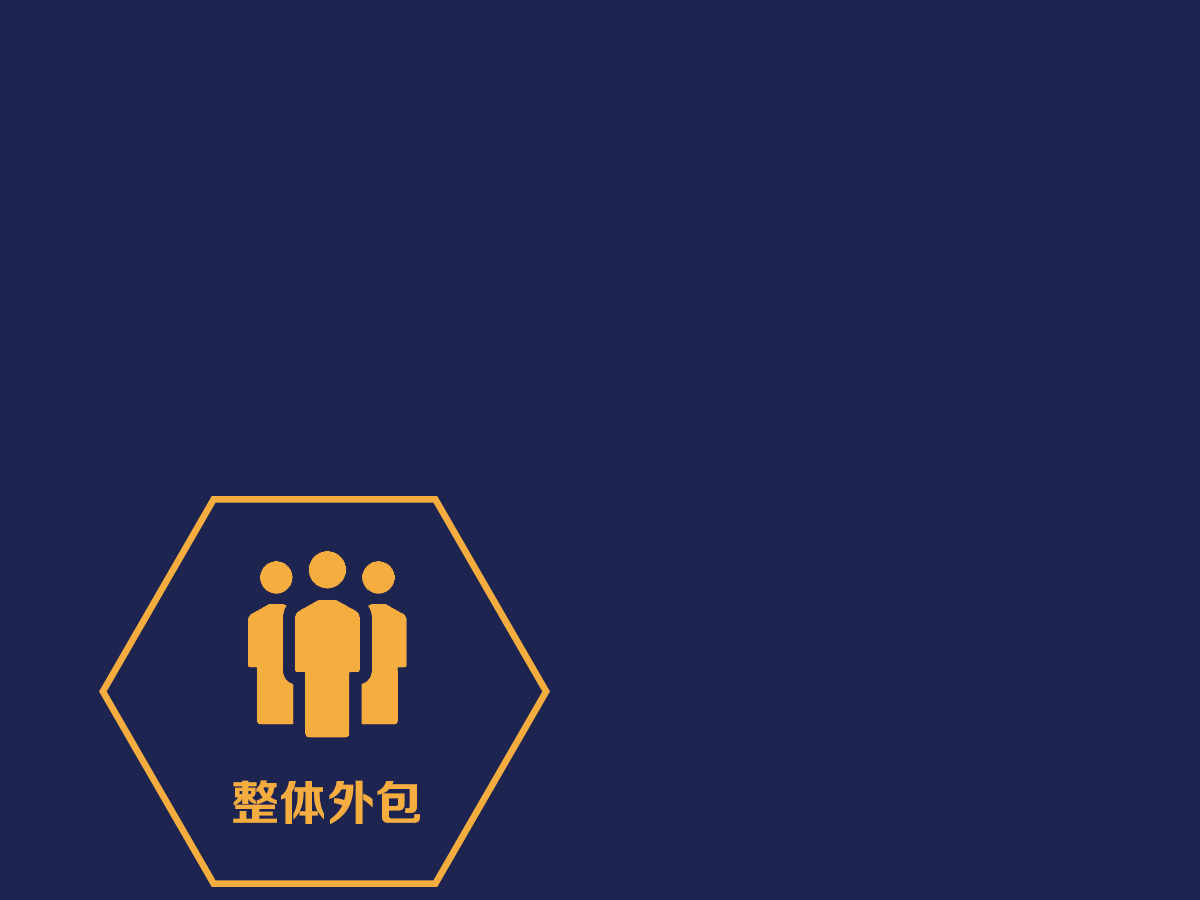
<style>
.page{position:relative;width:1200px;height:900px;background:#1e2450}
.page>*{position:absolute;margin:0}
.t1{font:48px "FZZCHJW--GB1-0";color:#f6ad3f}
</style>
<div class="page">
<p class="t1" style="left:233px;top:780px;width:187px;height:44px">整体外包</p>
</div>
